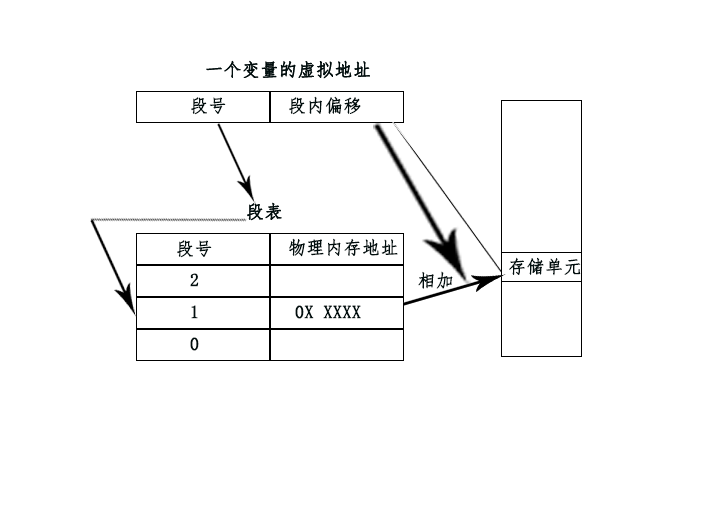
<style>
.page{position:relative;width:709px;height:510px;background:#ffffff}
.page>*{position:absolute;margin:0}
.t1{font:18px "FangSong";color:#010e0e;font-weight:bold}
</style>
<div class="page">
<p class="t1" style="left:206px;top:60px;width:164px;height:19px">一个变量的虚拟地址</p>
<p class="t1" style="left:206px;top:60px;width:164px;height:19px">一个变量的虚拟地址</p>
<p class="t1" style="left:191px;top:97px;width:35px;height:18px">段号</p>
<p class="t1" style="left:191px;top:97px;width:35px;height:18px">段号</p>
<p class="t1" style="left:289px;top:96px;width:72px;height:19px">段内偏移</p>
<p class="t1" style="left:289px;top:96px;width:72px;height:19px">段内偏移</p>
<p class="t1" style="left:247px;top:202px;width:35px;height:19px">段表</p>
<p class="t1" style="left:247px;top:202px;width:35px;height:19px">段表</p>
<p class="t1" style="left:177px;top:240px;width:35px;height:18px">段号</p>
<p class="t1" style="left:177px;top:240px;width:35px;height:18px">段号</p>
<p class="t1" style="left:289px;top:238px;width:109px;height:19px">物理内存地址</p>
<p class="t1" style="left:289px;top:238px;width:109px;height:19px">物理内存地址</p>
<p class="t1" style="left:509px;top:257px;width:72px;height:19px">存储单元</p>
<p class="t1" style="left:509px;top:257px;width:72px;height:19px">存储单元</p>
<p class="t1" style="left:190px;top:273px;width:9px;height:14px">2</p>
<p class="t1" style="left:190px;top:273px;width:9px;height:14px">2</p>
<p class="t1" style="left:418px;top:271px;width:35px;height:18px">相加</p>
<p class="t1" style="left:191px;top:305px;width:7px;height:14px">1</p>
<p class="t1" style="left:191px;top:305px;width:7px;height:14px">1</p>
<p class="t1" style="left:295px;top:305px;width:66px;height:14px">0X XXXX</p>
<p class="t1" style="left:295px;top:305px;width:66px;height:14px">0X XXXX</p>
<p class="t1" style="left:190px;top:337px;width:9px;height:14px">0</p>
<p class="t1" style="left:190px;top:337px;width:9px;height:14px">0</p>
</div>
